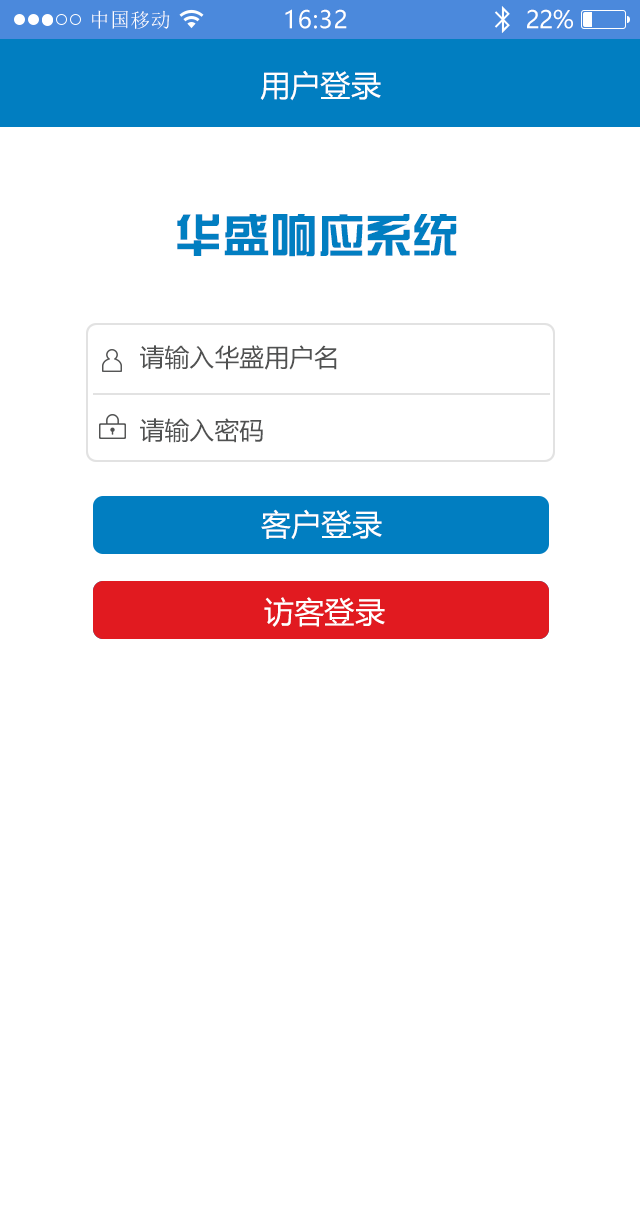
<style>
.page{position:relative;width:640px;height:1210px;background:#ffffff}
.page>*{position:absolute;margin:0}
.t1{font:20px "SimSun";letter-spacing:0.02em;color:#ffffff}
.t2{font:24px "MicrosoftYaHei";letter-spacing:0.025em;color:#ffffff}
.t3{font:24px "MicrosoftYaHei";letter-spacing:-0.02em;color:#ffffff}
.t4{font:30px "MicrosoftYaHei";letter-spacing:0.01em;color:#ffffff}
.t5{font:46.9px "FZZYJW--GB1-0";letter-spacing:0.01em;color:#017ec1}
.t6{font:24.7px "MicrosoftYaHei";letter-spacing:0.01em;color:#505151}
</style>
<div class="page">
<p class="t1" style="left:92px;top:10px;width:78px;height:19px">中国移动</p>
<p class="t2" style="left:285px;top:9px;width:62px;height:20px">16:32</p>
<p class="t3" style="left:527px;top:9px;width:46px;height:20px">22%</p>
<p class="t4" style="left:260px;top:70px;width:121px;height:31px">用户登录</p>
<p class="t5" style="left:177px;top:214px;width:280px;height:43px">华盛响应系统</p>
<p class="t6" style="left:140px;top:345px;width:197px;height:25px">请输入华盛用户名</p>
<p class="t6" style="left:140px;top:418px;width:123px;height:25px">请输入密码</p>
<p class="t4" style="left:261px;top:509px;width:121px;height:31px">客户登录</p>
<p class="t4" style="left:264px;top:597px;width:121px;height:30px">访客登录</p>
</div>
